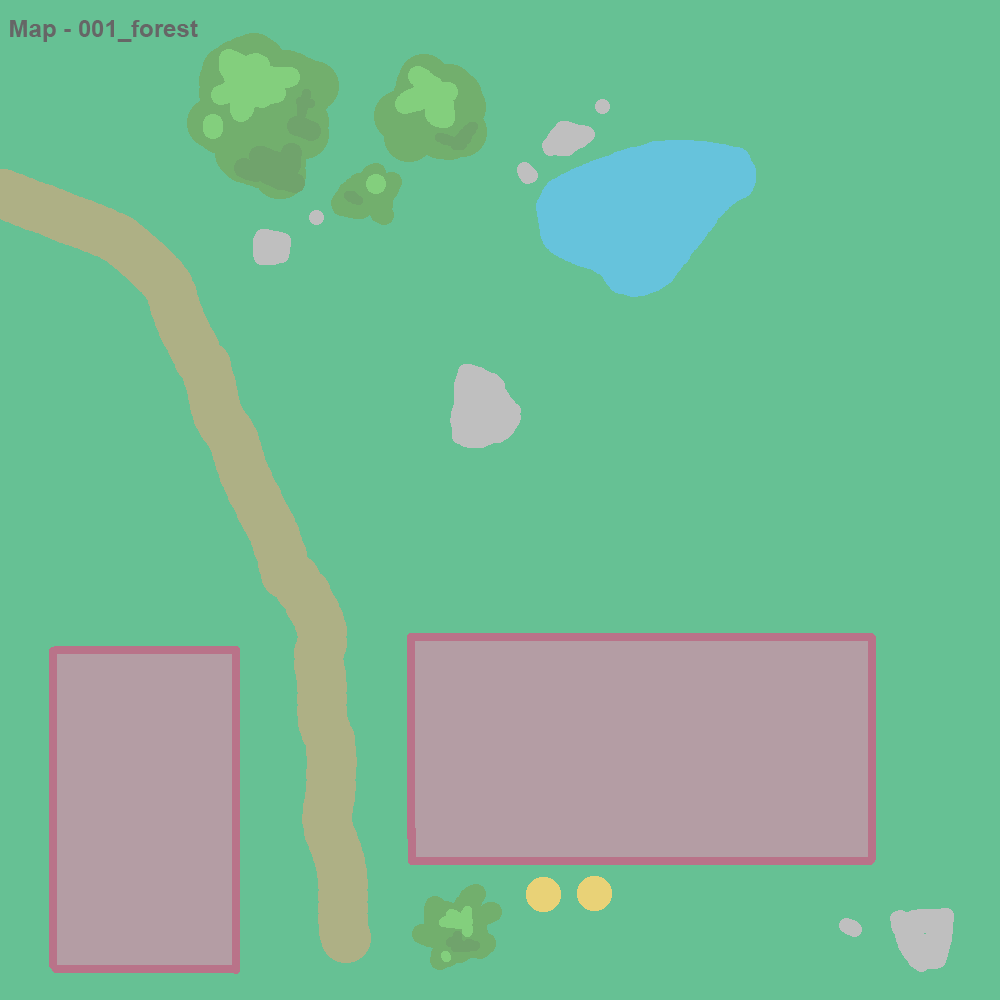
<style>
.page{position:relative;width:1000px;height:1000px;background:#66c194}
.page>*{position:absolute;margin:0}
.t1{font:24px "Arial-BoldMT";color:#666666}
</style>
<div class="page">
<p class="t1" style="left:10px;top:20px;width:188px;height:22px">Map - 001_forest</p>
</div>
